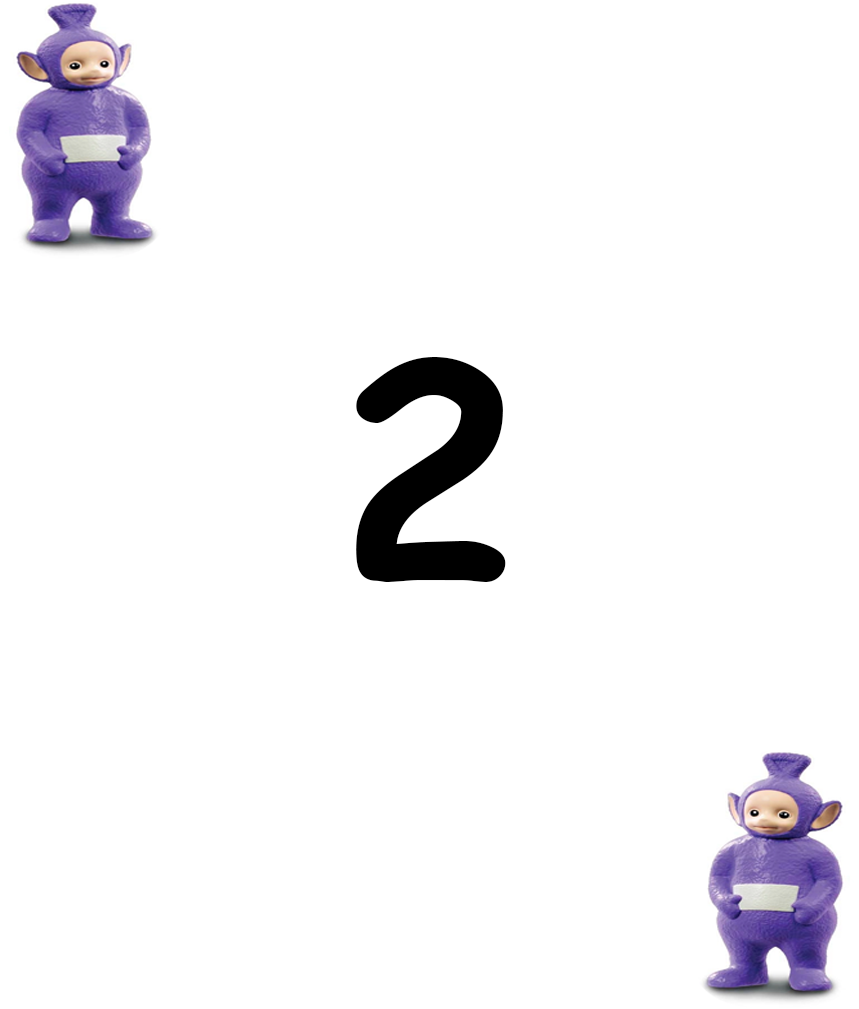
<style>
.page{position:relative;width:859px;height:1009px;background:#ffffff}
.page>*{position:absolute;margin:0}
.t1{font:300px "ComicSansMS-Bold";color:#000000;font-variant:small-caps}
</style>
<div class="page">
<p class="t1" style="left:356px;top:357px;width:150px;height:225px">2</p>
</div>
